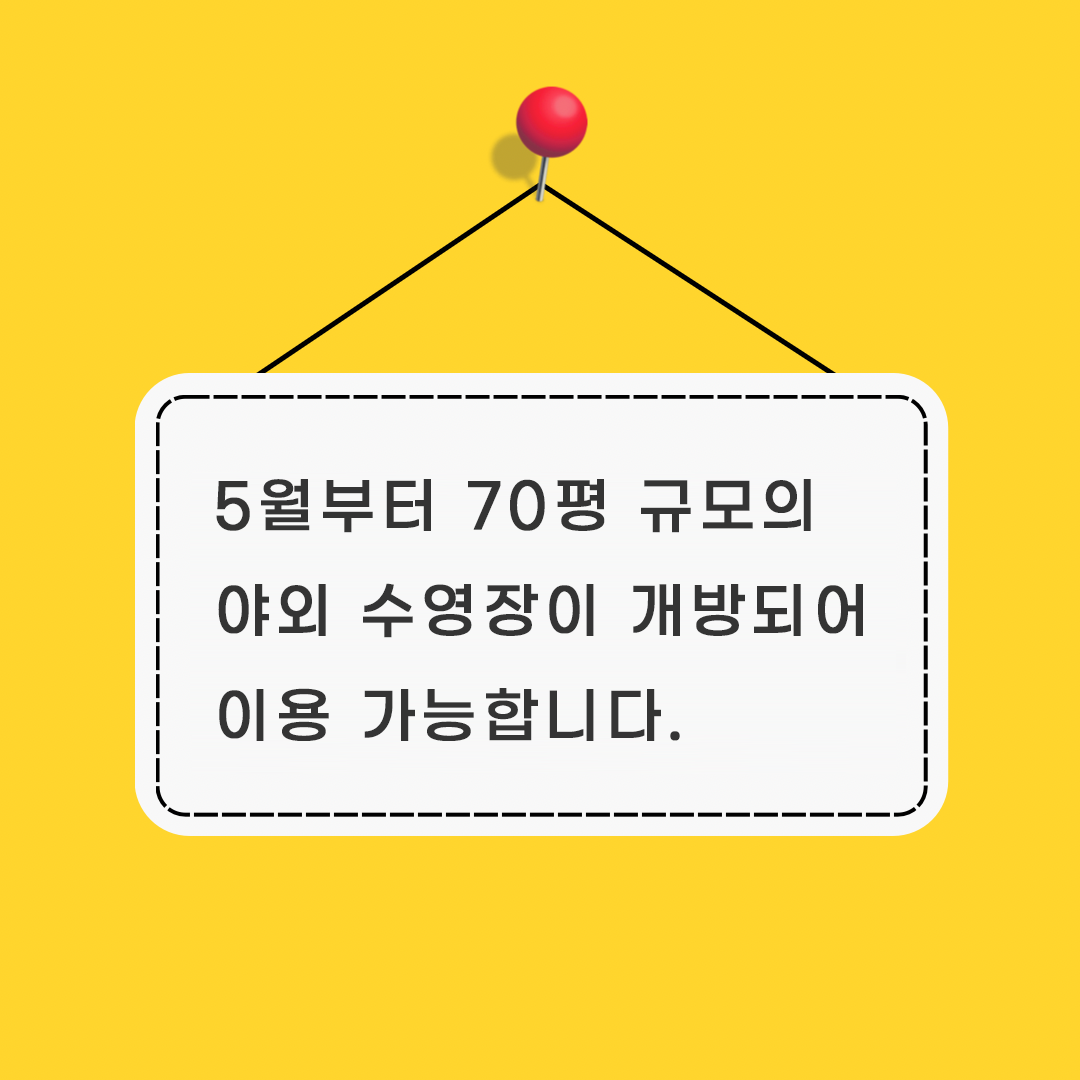
<style>
.page{position:relative;width:1080px;height:1080px;background:#ffd52d}
.page>*{position:absolute;margin:0}
.t1{font:60px "GmarketSansMedium";letter-spacing:0.1em;color:#343434;font-weight:bold;scale:0.94 1}
</style>
<div class="page">
<p class="t1" style="left:216px;top:479px;width:647px;height:262px">5월부터 70평 규모의<br>야외 수영장이 개방되어<br>이용 가능합니다.</p>
</div>
